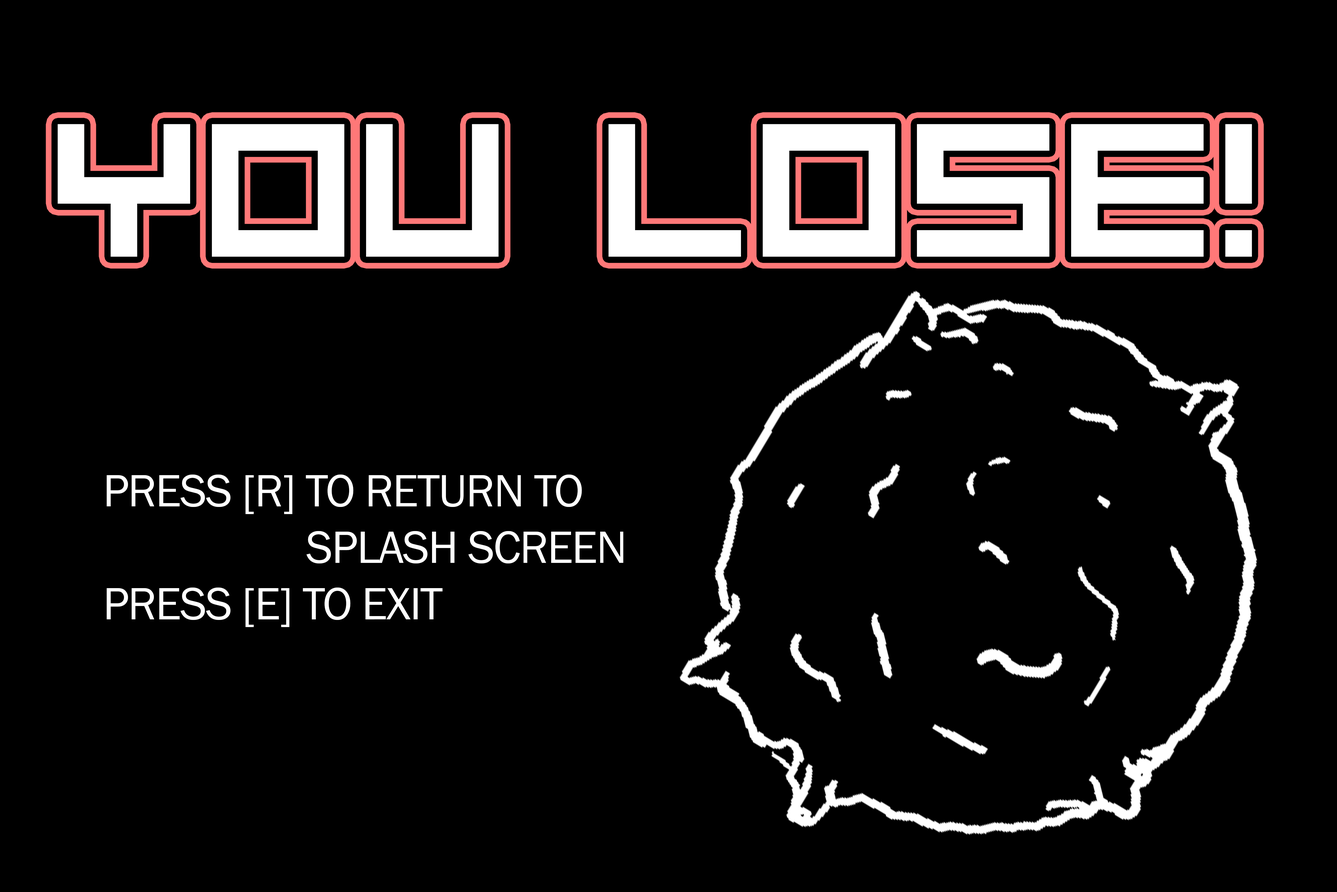
<style>
.page{position:relative;width:1337px;height:892px;background:#000000}
.page>*{position:absolute;margin:0}
.t1{font:185.8px "Bit-Trip7-sRB)";letter-spacing:-0.025em;color:#ffffff}
.t2{font:47.1px "FranklinGothic-Book";letter-spacing:-0.025em;color:#ffffff}
</style>
<div class="page">
<p class="t1" style="left:58px;top:124px;width:1194px;height:133px">YOU lose!</p>
<p class="t2" style="left:107px;top:474px;width:517px;height:153px">PRESS [R] TO RETURN TO <br>                   SPLASH SCREEN<br>PRESS [E] TO EXIT</p>
</div>
